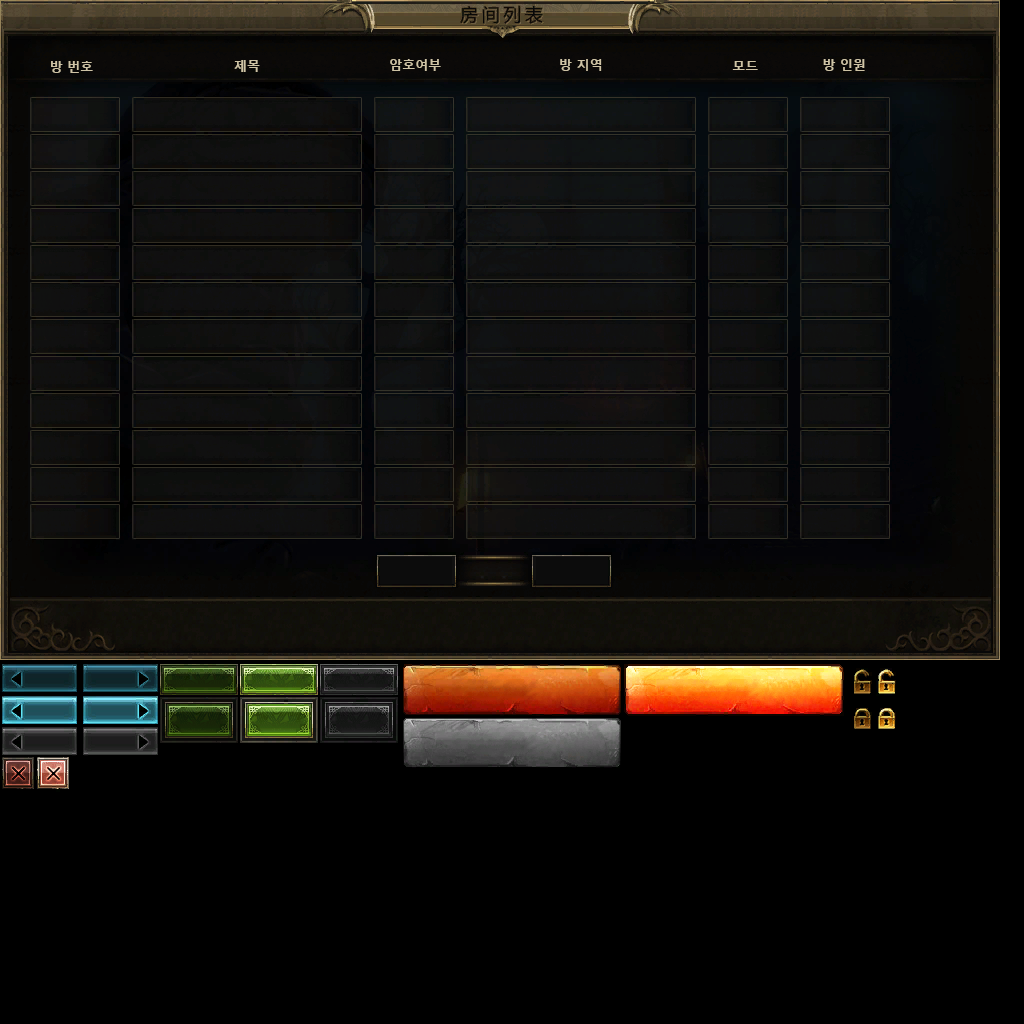
<style>
.page{position:relative;width:1024px;height:1024px;background:#000000}
.page>*{position:absolute;margin:0}
.t1{font:13px "MalgunGothicBold";color:#cec3a5}
</style>
<div class="page">
<p class="t1" style="left:51px;top:61px;width:42px;height:12px">방 번호</p>
<p class="t1" style="left:234px;top:60px;width:26px;height:12px">제목</p>
<p class="t1" style="left:390px;top:59px;width:51px;height:12px">암호여부</p>
<p class="t1" style="left:560px;top:59px;width:42px;height:12px">방 지역</p>
<p class="t1" style="left:732px;top:61px;width:26px;height:9px">모드</p>
<p class="t1" style="left:823px;top:59px;width:42px;height:12px">방 인원</p>
</div>
